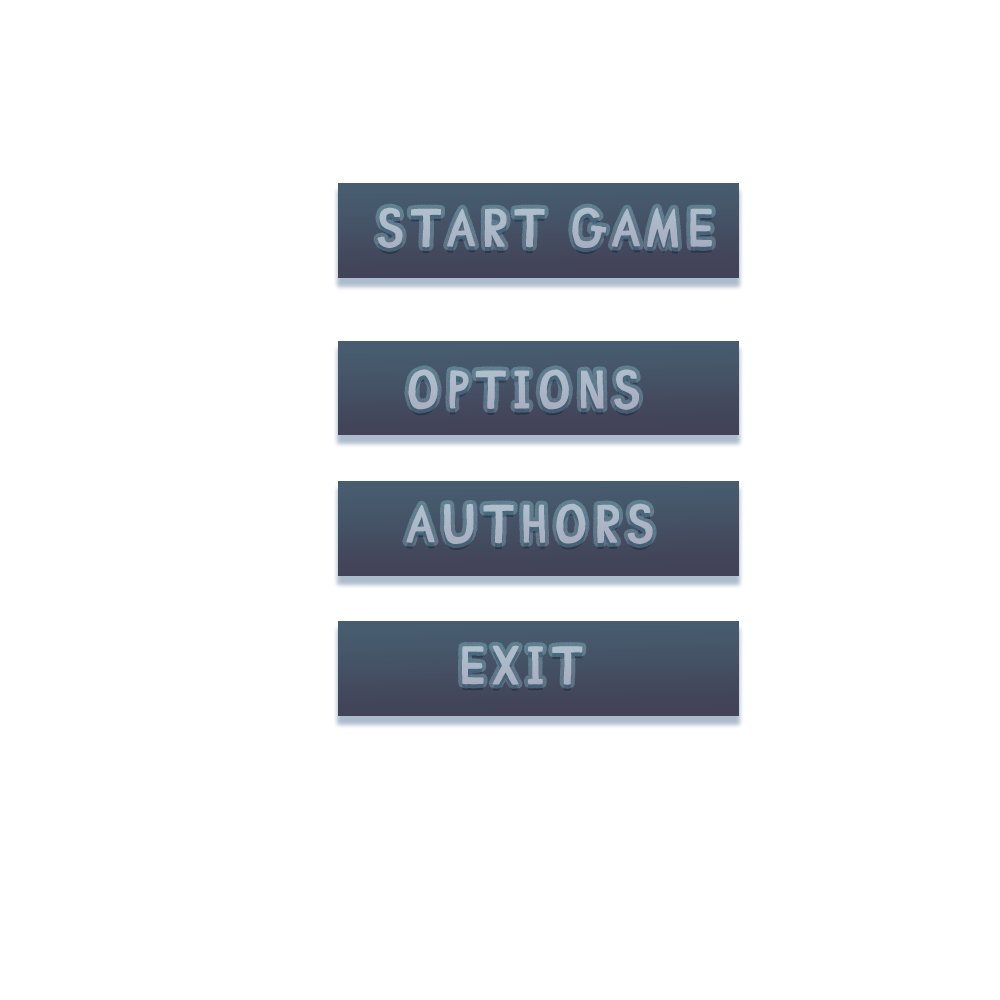
<style>
.page{position:relative;width:1000px;height:1000px;background:#ffffff}
.page>*{position:absolute;margin:0}
.t1{font:54.4px "ComicCAT";letter-spacing:0.075em;color:#abb7c6}
.t2{font:54.4px "ComicCAT";letter-spacing:0.075em;color:#acb7c7}
.t3{font:54.4px "ComicCAT";letter-spacing:0.075em;color:#acb8c7}
</style>
<div class="page">
<p class="t1" style="left:377px;top:207px;width:335px;height:41px">Start game</p>
<p class="t2" style="left:408px;top:369px;width:231px;height:41px">Options</p>
<p class="t2" style="left:406px;top:503px;width:247px;height:41px">Authors</p>
<p class="t3" style="left:462px;top:645px;width:121px;height:40px">Exit</p>
</div>
